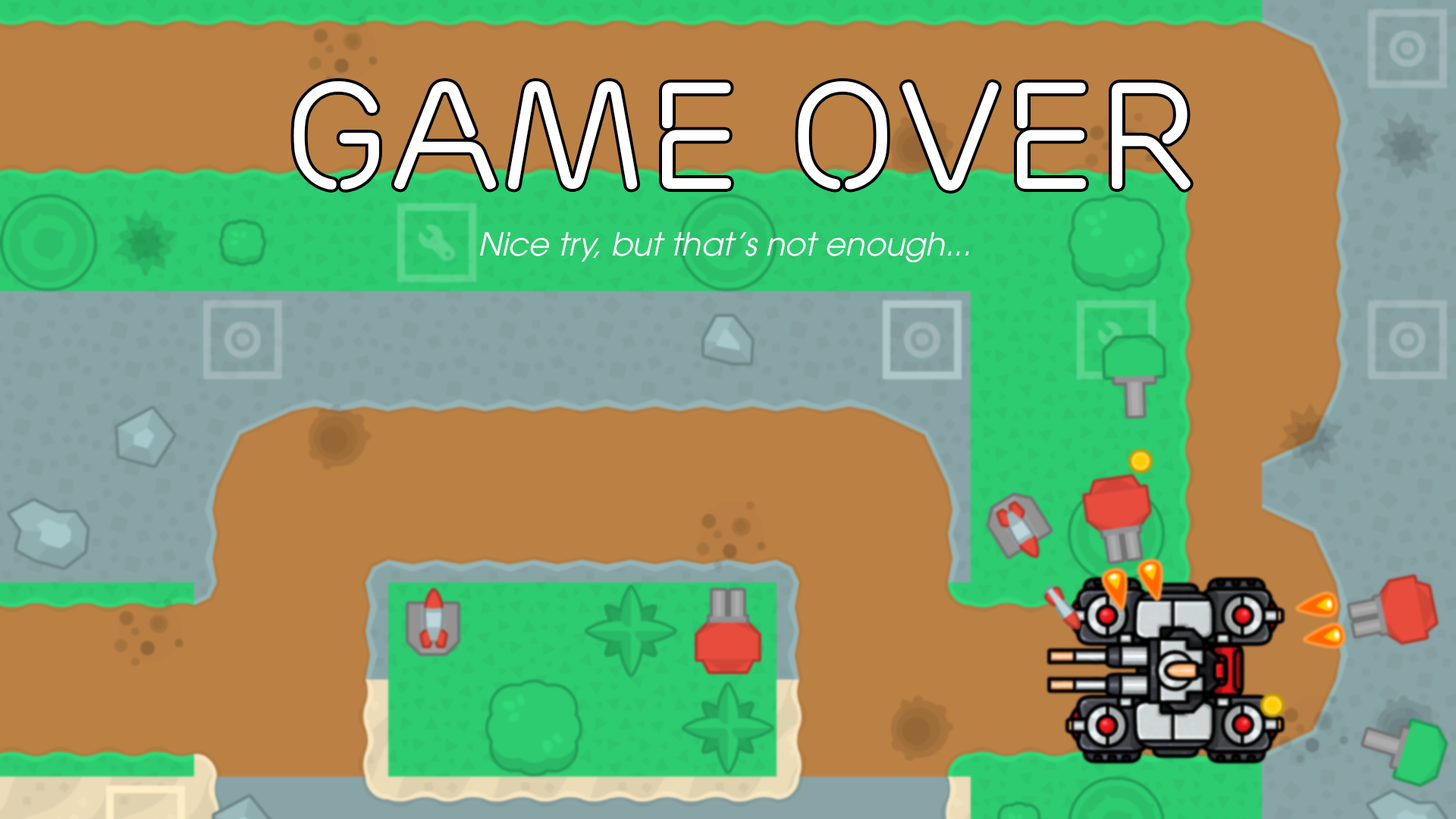
<style>
.page{position:relative;width:1456px;height:819px;background:#bb8044}
.page>*{position:absolute;margin:0}
.t1{font:151.7px "UTM-Ericsson-Capital";color:#ffffff}
.t2{font:31.6px "UTMAvo-Italic";color:#ffffff}
</style>
<div class="page">
<p class="t1" style="left:293px;top:81px;width:898px;height:110px">GAME OVER</p>
<p class="t2" style="left:480px;top:232px;width:489px;height:30px">Nice try, but that’s not enough...</p>
</div>
